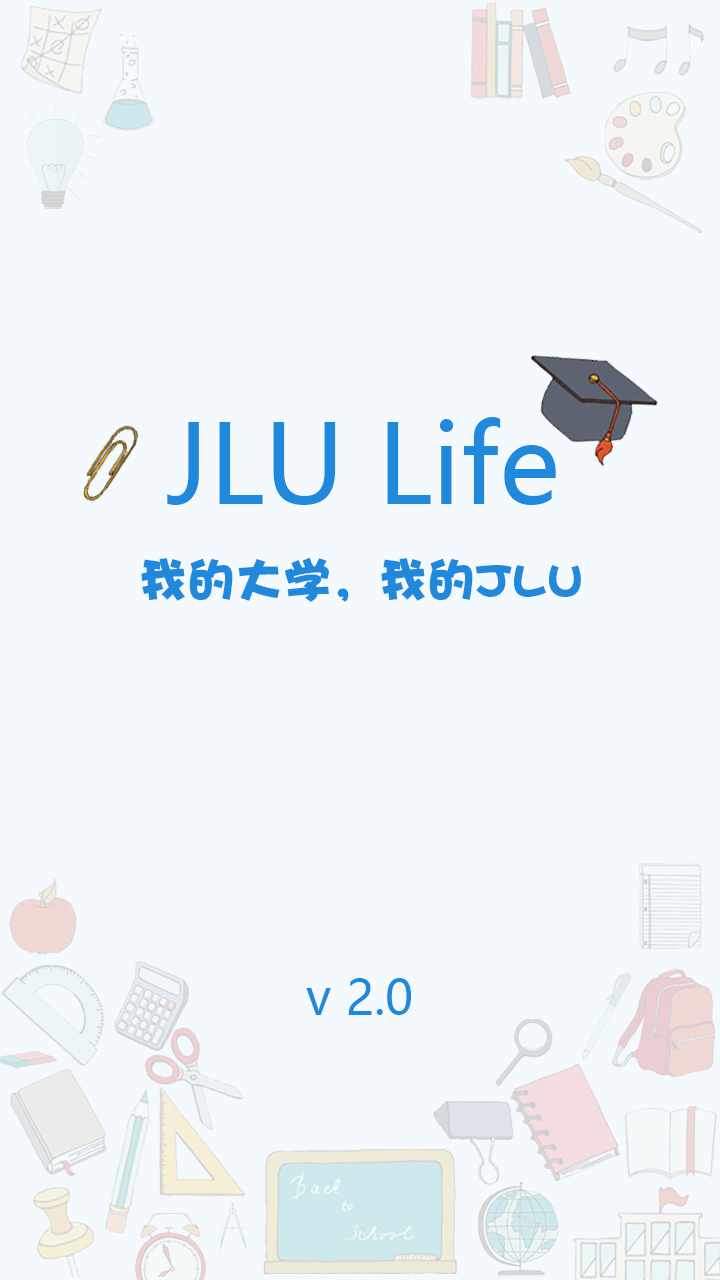
<style>
.page{position:relative;width:720px;height:1280px;background:#f4f9fd}
.page>*{position:absolute;margin:0}
.t1{font:108px "MicrosoftYaHei";color:#2089dc}
.t2{font:48px "DFPHaiBaoW12";color:#2089dc}
.t3{font:48px "MicrosoftYaHei";color:#2089dc}
</style>
<div class="page">
<p class="t1" style="left:167px;top:417px;width:389px;height:88px">JLU Life</p>
<p class="t2" style="left:141px;top:557px;width:440px;height:45px">我的大学，我的JLU</p>
<p class="t3" style="left:306px;top:978px;width:106px;height:37px">v 2.0</p>
</div>
